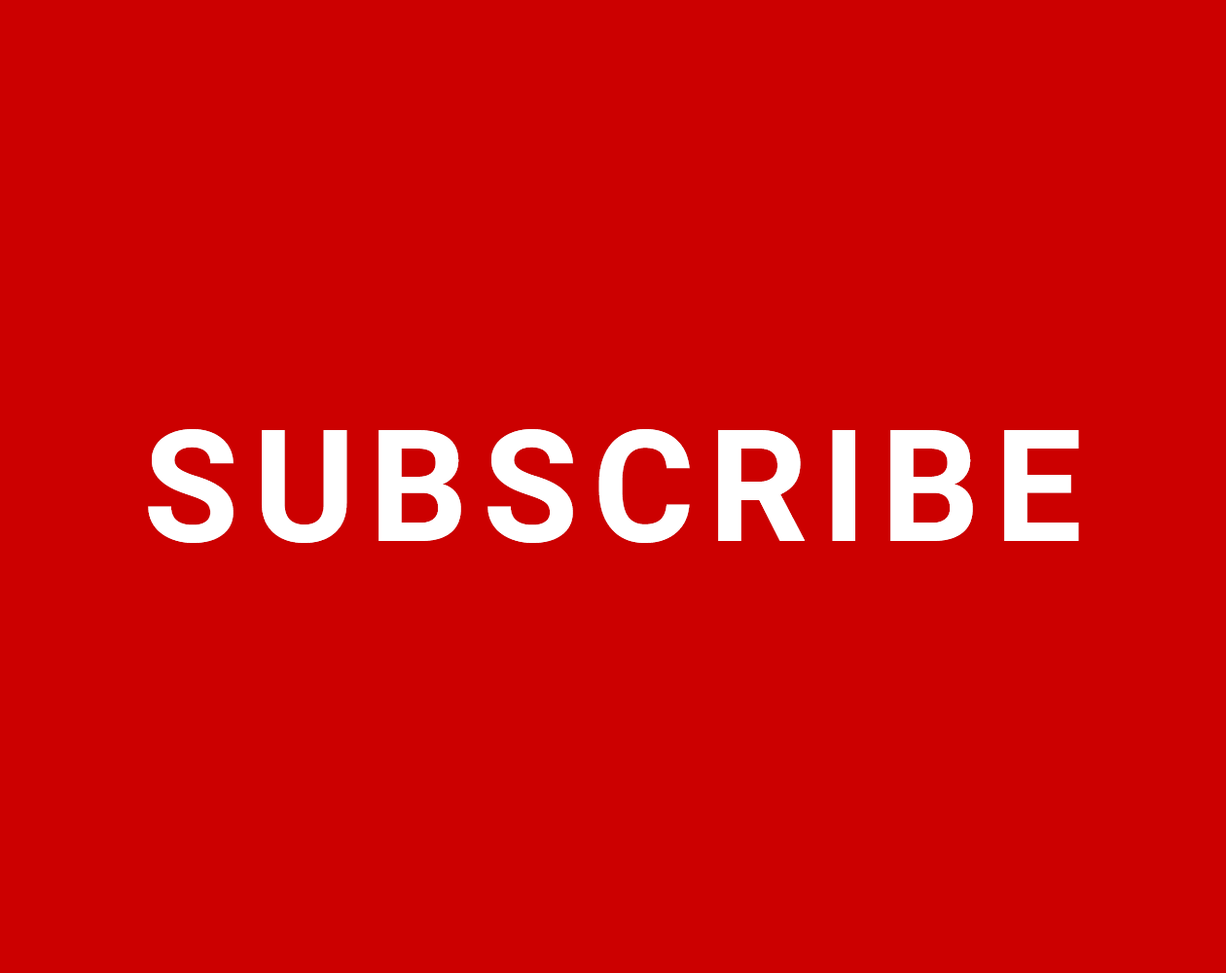
<style>
.page{position:relative;width:1226px;height:973px;background:#cc0000}
.page>*{position:absolute;margin:0}
.t1{font:155.7px "Roboto-Bold";letter-spacing:0.09em;color:#ffffff}
</style>
<div class="page">
<p class="t1" style="left:148px;top:429px;width:931px;height:114px">SUBSCRIBE</p>
</div>
